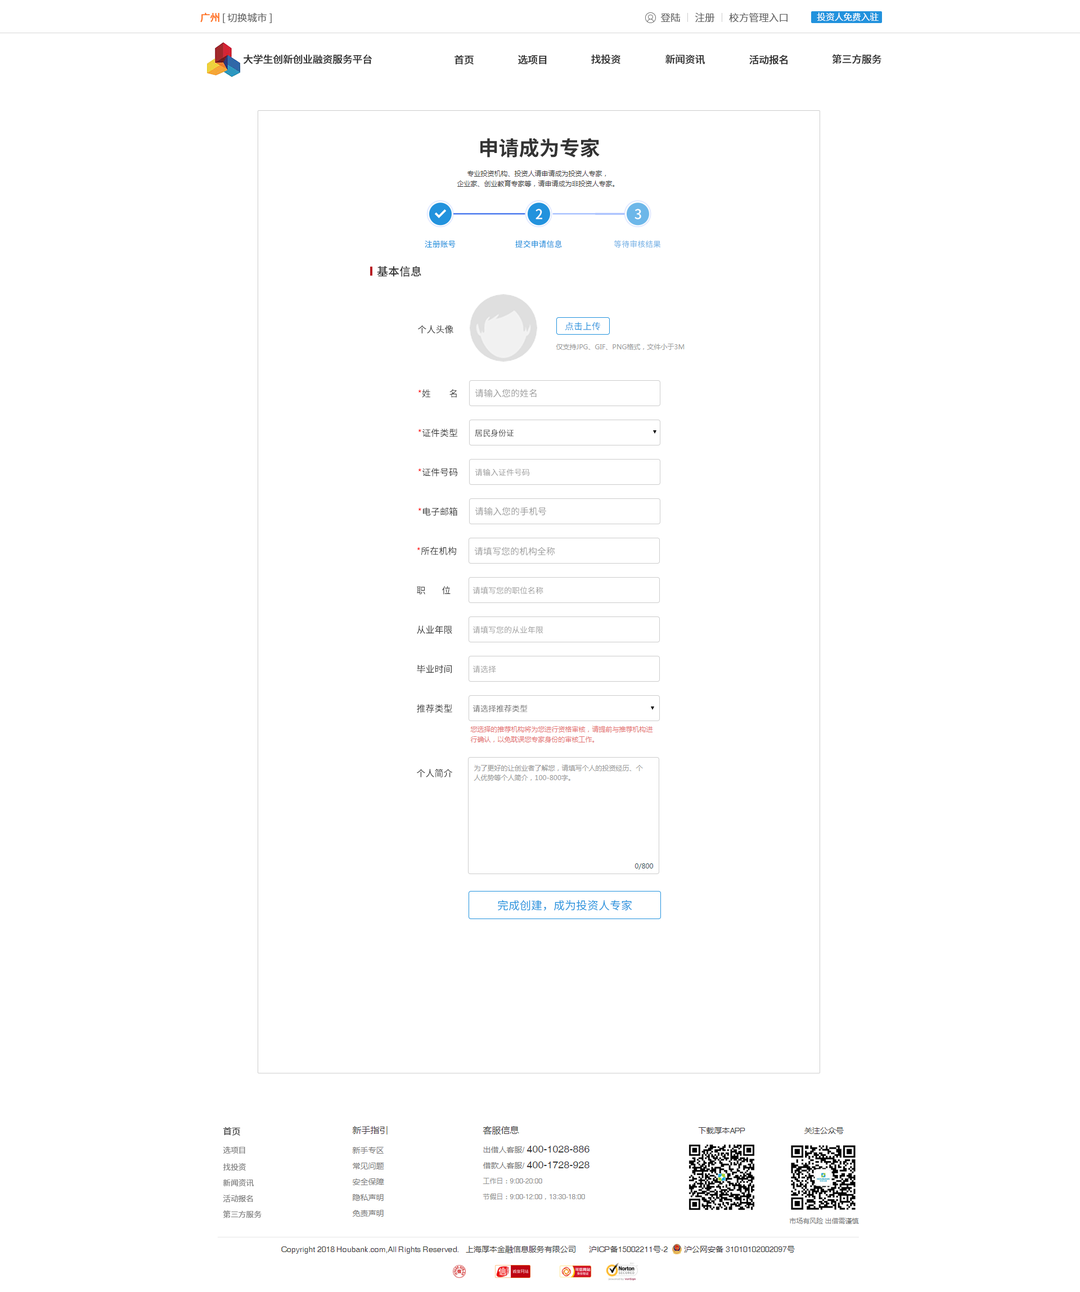
<style>
.page{position:relative;width:1080px;height:1292px;background:#ffffff}
.page>*{position:absolute;margin:0}
.t1{font:10.1px "SourceHanSansCN-Normal";letter-spacing:-0.02em;color:#666666}
.t2{font:10.1px "SourceHanSansCN-Medium";letter-spacing:-0.02em;color:#ff711b}
.t3{font:9px "SourceHanSansCN-Normal";letter-spacing:-0.02em;color:#ffffff}
.t4{font:10.1px "SourceHanSansCN-Medium";letter-spacing:-0.02em;color:#333333}
.t5{font:20.2px "SourceHanSansCN-Bold";color:#333333}
.t6{font:13.5px "SourceHanSansCN-Medium";color:#ffffff}
.t7{font:7.9px "SourceHanSansCN-Medium";color:#2292dd}
.t8{font:7.9px "SourceHanSansCN-Medium";color:#7eb7e7}
.t9{font:11.2px "SourceHanSansCN-Medium";color:#333333}
.t10{font:9px "SourceHanSansCN-Regular";color:#333333}
.t11{font:9px "SourceHanSansCN-Regular";color:#2292dd}
.t12{font:9px "SourceHanSansCN-Regular";color:#ff0000}
.t13{font:9px "SourceHanSansCN-Regular";color:#999999}
.t14{font:7.9px "SourceHanSansCN-Regular";color:#333333}
.t15{font:7.9px "SourceHanSansCN-Regular";color:#999999}
.t16{font:7.9px "SourceHanSansCN-Regular";color:#666666}
.t17{font:11.2px "SourceHanSansCN-Regular";color:#2292dd}
.t18{font:7.9px/15.8px "SourceHanSansCN-Normal";letter-spacing:-0.02em;color:#808080}
.t19{font:9px/19.1px "SourceHanSansCN-Normal";letter-spacing:-0.02em;color:#333333}
.t20{font:7.9px/18.6px "SourceHanSansCN-Normal";letter-spacing:-0.02em;color:#808080}
.t21{font:7.9px/16.9px "SourceHanSansCN-Normal";letter-spacing:-0.02em;color:#808080}
</style>
<div class="page">
<p class="t1" style="left:200px;top:12px;width:72px;height:11px"><span class="t2">广州</span> [切换城市]</p>
<p class="t1" style="left:660px;top:12px;width:128px;height:10px">登陆       注册       校方管理入口</p>
<p class="t3" style="left:817px;top:12px;width:62px;height:9px">投资人免费入驻</p>
<p class="t4" style="left:591px;top:54px;width:29px;height:10px">找投资</p>
<p class="t4" style="left:832px;top:54px;width:49px;height:10px">第三方服务</p>
<p class="t4" style="left:244px;top:55px;width:128px;height:9px">大学生创新创业融资服务平台</p>
<p class="t4" style="left:454px;top:55px;width:20px;height:10px">首页</p>
<p class="t4" style="left:518px;top:55px;width:29px;height:10px">选项目</p>
<p class="t4" style="left:665px;top:55px;width:40px;height:9px">新闻资讯</p>
<p class="t4" style="left:749px;top:55px;width:39px;height:10px">活动报名</p>
<p class="t5" style="left:480px;top:138px;width:120px;height:20px">申请成为专家</p>
<p class="t6" style="left:536px;top:209px;width:6px;height:10px">2</p>
<p class="t6" style="left:634px;top:209px;width:7px;height:10px">3</p>
<p class="t7" style="left:425px;top:240px;width:31px;height:8px">注册账号</p>
<p class="t7" style="left:515px;top:240px;width:47px;height:8px">提交申请信息</p>
<p class="t8" style="left:614px;top:240px;width:47px;height:8px">等待审核结果</p>
<p class="t9" style="left:377px;top:266px;width:44px;height:11px">基本信息</p>
<p class="t10" style="left:418px;top:325px;width:35px;height:9px">个人头像</p>
<p class="t11" style="left:565px;top:322px;width:36px;height:9px">点击上传</p>
<p class="t10" style="left:418px;top:389px;width:39px;height:9px"><span class="t12">*</span>姓         名</p>
<p class="t13" style="left:475px;top:389px;width:62px;height:9px">请输入您的姓名</p>
<p class="t10" style="left:418px;top:429px;width:40px;height:8px"><span class="t12">*</span>证件类型</p>
<p class="t14" style="left:475px;top:429px;width:39px;height:8px">居民身份证</p>
<p class="t10" style="left:418px;top:468px;width:39px;height:8px"><span class="t12">*</span>证件号码</p>
<p class="t15" style="left:475px;top:469px;width:55px;height:7px">请输入证件号码</p>
<p class="t10" style="left:418px;top:507px;width:39px;height:9px"><span class="t12">*</span>电子邮箱</p>
<p class="t13" style="left:475px;top:507px;width:71px;height:9px">请输入您的手机号</p>
<p class="t10" style="left:417px;top:547px;width:39px;height:8px"><span class="t12">*</span>所在机构</p>
<p class="t13" style="left:474px;top:547px;width:81px;height:9px">请填写您的机构全称</p>
<p class="t10" style="left:417px;top:586px;width:34px;height:9px">职        位</p>
<p class="t15" style="left:472px;top:587px;width:71px;height:8px">请填写您的职位名称</p>
<p class="t10" style="left:417px;top:626px;width:35px;height:8px">从业年限</p>
<p class="t15" style="left:472px;top:626px;width:71px;height:8px">请填写您的从业年限</p>
<p class="t10" style="left:417px;top:665px;width:35px;height:8px">毕业时间</p>
<p class="t15" style="left:472px;top:665px;width:24px;height:8px">请选择</p>
<p class="t10" style="left:417px;top:704px;width:35px;height:9px">推荐类型</p>
<p class="t16" style="left:472px;top:705px;width:56px;height:8px">请选择推荐类型</p>
<p class="t10" style="left:417px;top:769px;width:36px;height:8px">个人简介</p>
<p class="t17" style="left:498px;top:900px;width:134px;height:11px">完成创建，成为投资人专家</p>
<p class="t18" style="left:223px;top:1127px;width:39px;height:91px"><span class="t19">首页 <br></span><span class="t20">选项目<br></span><span class="t21">找投资<br></span>新闻资讯<br>活动报名<br>第三方服务</p>
</div>
